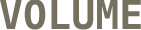
<style>
.page{position:relative;width:141px;height:30px;background:#ffffff}
.page>*{position:absolute;margin:0}
.t1{font:40px "Menlo-Bold";color:#75715e}
</style>
<div class="page">
<p class="t1" style="left:0px;top:0px;width:141px;height:30px">VOLUME</p>
</div>
